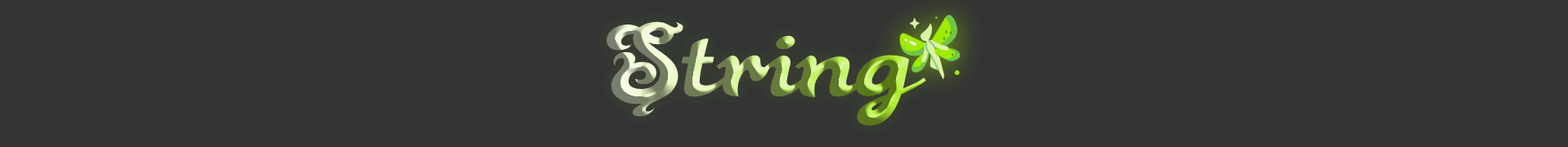
<style>
.page{position:relative;width:1568px;height:147px;background:#333333}
.page>*{position:absolute;margin:0}
.t1{font:108.8px "BlackRose";scale:1.2 1}
</style>
<div class="page">
<p class="t1" style="left:607px;top:21px;width:319px;height:105px">String</p>
</div>
